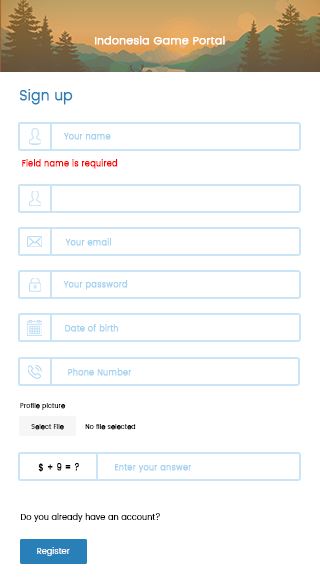
<style>
.page{position:relative;width:320px;height:580px;background:#ffffff}
.page>*{position:absolute;margin:0}
.t1{font:11.2px "Poppins-Light";color:#ffffff;font-weight:bold}
.t2{font:14px "Poppins-Light";color:#2980b9;font-weight:bold}
.t3{font:8.5px "Poppins-Light";color:#a4d2f0;font-weight:bold}
.t4{font:8.5px "Poppins-Light";color:#ff0000;font-weight:bold}
.t5{font:6.4px "Poppins-Light";color:#000000;font-weight:bold}
.t6{font:8.6px "Poppins-Light";color:#000000;font-weight:bold}
.t7{font:8.6px "Poppins-Light";color:#a4d2f0;font-weight:bold}
.t8{font:8px "Poppins-Light";color:#000000;font-weight:bold}
.t9{font:8px "Poppins-Light";color:#ffffff;font-weight:bold}
</style>
<div class="page">
<p class="t1" style="left:95px;top:36px;width:130px;height:9px">Indonesia Game Portal</p>
<p class="t2" style="left:20px;top:89px;width:53px;height:16px">Sign up</p>
<p class="t3" style="left:64px;top:133px;width:47px;height:7px">Your name</p>
<p class="t4" style="left:22px;top:159px;width:96px;height:10px">Field name is required</p>
<p class="t3" style="left:65px;top:238px;width:46px;height:8px">Your email</p>
<p class="t3" style="left:63px;top:280px;width:65px;height:10px">Your password</p>
<p class="t3" style="left:65px;top:324px;width:53px;height:8px">Date of birth</p>
<p class="t3" style="left:68px;top:368px;width:64px;height:8px">Phone Number</p>
<p class="t5" style="left:20px;top:403px;width:46px;height:7px">Profile picture</p>
<p class="t5" style="left:31px;top:424px;width:33px;height:6px">Select File</p>
<p class="t5" style="left:85px;top:424px;width:51px;height:6px">No file selected</p>
<p class="t6" style="left:38px;top:463px;width:41px;height:9px">$ + 9 = ?</p>
<p class="t7" style="left:115px;top:464px;width:77px;height:9px">Enter your answer</p>
<p class="t8" style="left:21px;top:513px;width:139px;height:9px">Do you already have an account?</p>
<p class="t9" style="left:37px;top:547px;width:33px;height:9px">Register</p>
</div>
